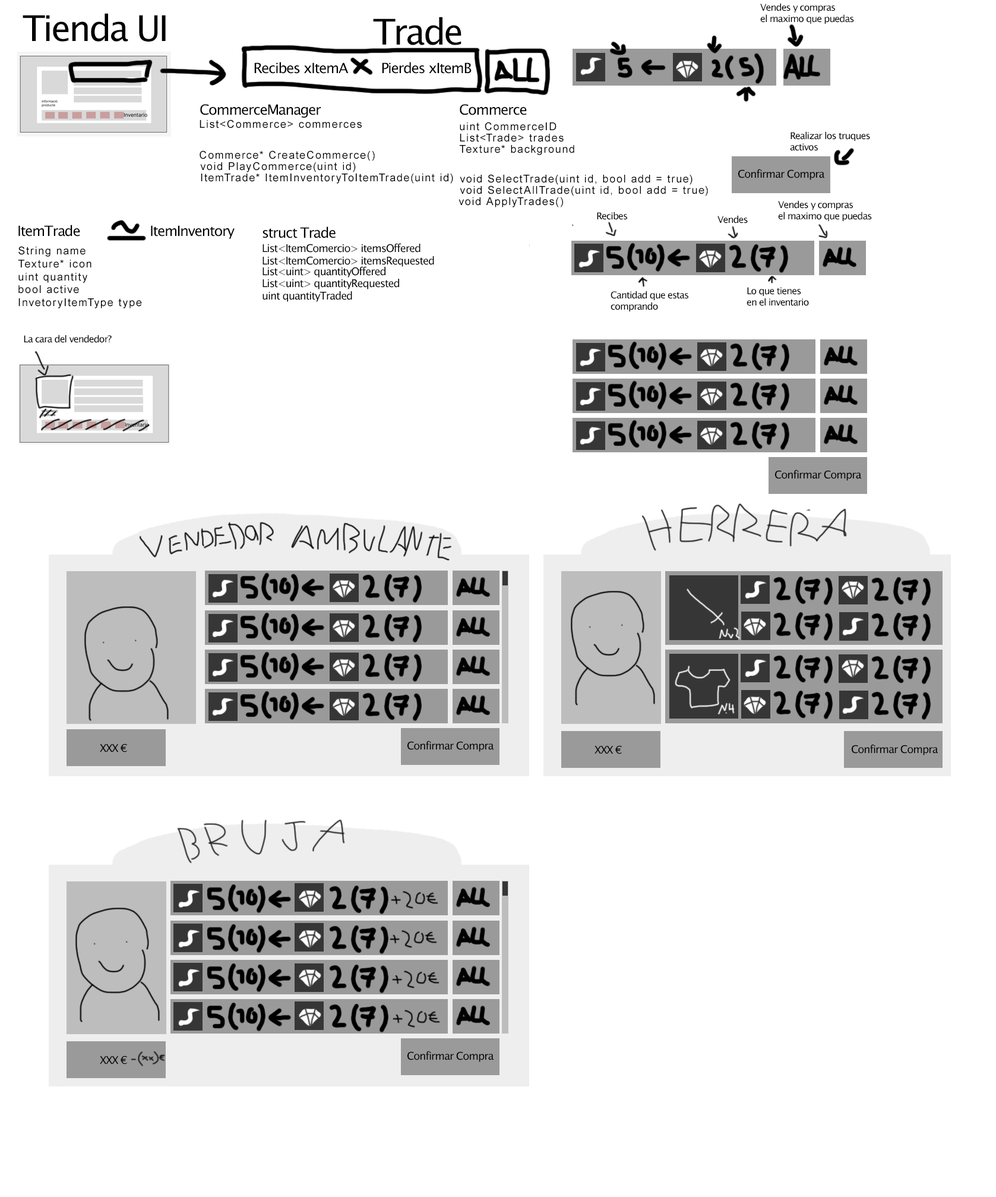
<style>
.page{position:relative;width:996px;height:1197px;background:#ffffff}
.page>*{position:absolute;margin:0}
.t1{font:9.5px "LucidaSansUnicode";letter-spacing:-0.06em;color:#000000}
.t2{font:35.7px "LucidaSansUnicode";letter-spacing:-0.06em;color:#000000}
.t3{font:14.3px "LucidaSansUnicode";letter-spacing:-0.06em;color:#000000}
.t4{font:10.7px "ArialMT";letter-spacing:0.1em;color:#000000}
.t5{font:10.7px "LucidaSansUnicode";letter-spacing:-0.06em;color:#000000}
</style>
<div class="page">
<p class="t1" style="left:761px;top:3px;width:93px;height:21px">Vendes y compras<br>el maximo que puedas</p>
<p class="t2" style="left:23px;top:13px;width:143px;height:29px">Tienda UI</p>
<p class="t2" style="left:373px;top:17px;width:89px;height:28px">Trade</p>
<p class="t3" style="left:254px;top:62px;width:95px;height:12px">Recibes xItemA</p>
<p class="t3" style="left:382px;top:62px;width:90px;height:12px">Pierdes xItemB</p>
<p class="t3" style="left:200px;top:104px;width:121px;height:14px">CommerceManager</p>
<p class="t3" style="left:460px;top:104px;width:67px;height:11px">Commerce</p>
<p class="t4" style="left:200px;top:119px;width:162px;height:9px">List&lt;Commerce&gt; commerces</p>
<p class="t4" style="left:460px;top:122px;width:97px;height:9px">uint CommerceID</p>
<p class="t4" style="left:460px;top:134px;width:104px;height:8px">List&lt;Trade&gt; trades</p>
<p class="t1" style="left:790px;top:131px;width:80px;height:20px">Realizar los truques<br>activos</p>
<p class="t4" style="left:459px;top:145px;width:116px;height:10px">Texture* background</p>
<p class="t4" style="left:200px;top:150px;width:175px;height:11px">Commerce* CreateCommerce()</p>
<p class="t4" style="left:200px;top:162px;width:156px;height:10px">void PlayCommerce(uint id)</p>
<p class="t4" style="left:201px;top:174px;width:252px;height:10px">ItemTrade* ItemInventoryToItemTrade(uint id)</p>
<p class="t5" style="left:739px;top:169px;width:86px;height:11px">Confirmar Compra</p>
<p class="t4" style="left:460px;top:174px;width:233px;height:11px">void SelectTrade(uint id, bool add = true)</p>
<p class="t4" style="left:460px;top:185px;width:248px;height:11px">void SelectAllTrade(uint id, bool add = true)</p>
<p class="t4" style="left:459px;top:197px;width:104px;height:10px">void ApplyTrades()</p>
<p class="t1" style="left:778px;top:200px;width:94px;height:21px">Vendes y compras<br>el maximo que puedas</p>
<p class="t1" style="left:597px;top:212px;width:30px;height:8px">Recibes</p>
<p class="t1" style="left:718px;top:215px;width:30px;height:8px">Vendes</p>
<p class="t3" style="left:18px;top:225px;width:62px;height:11px">ItemTrade</p>
<p class="t3" style="left:151px;top:225px;width:84px;height:14px">ItemInventory</p>
<p class="t3" style="left:263px;top:226px;width:73px;height:12px">struct Trade</p>
<p class="t4" style="left:18px;top:246px;width:124px;height:62px">String name<br>Texture* icon<br>uint quantity<br>bool active<br>InvetoryItemType type</p>
<p class="t5" style="left:263px;top:243px;width:158px;height:10px">List&lt;ItemComercio&gt; itemsOffered</p>
<p class="t5" style="left:263px;top:256px;width:171px;height:11px">List&lt;ItemComercio&gt; itemsRequested</p>
<p class="t5" style="left:263px;top:266px;width:123px;height:11px">List&lt;uint&gt; quantityOffered</p>
<p class="t5" style="left:263px;top:279px;width:136px;height:10px">List&lt;uint&gt; quantityRequested</p>
<p class="t5" style="left:263px;top:291px;width:89px;height:11px">uint quantityTraded</p>
<p class="t1" style="left:611px;top:291px;width:78px;height:20px">Cantidad que estas<br>comprando</p>
<p class="t1" style="left:747px;top:287px;width:62px;height:19px">Lo que tienes<br>en el inventario</p>
<p class="t1" style="left:24px;top:335px;width:88px;height:8px">La cara del vendedor?</p>
<p class="t5" style="left:775px;top:469px;width:87px;height:12px">Confirmar Compra</p>
<p class="t5" style="left:100px;top:743px;width:27px;height:9px">XXX €</p>
<p class="t5" style="left:408px;top:740px;width:86px;height:12px">Confirmar Compra</p>
<p class="t5" style="left:595px;top:745px;width:27px;height:9px">XXX €</p>
<p class="t5" style="left:852px;top:744px;width:86px;height:11px">Confirmar Compra</p>
<p class="t5" style="left:100px;top:1055px;width:27px;height:9px">XXX €</p>
<p class="t5" style="left:408px;top:1051px;width:86px;height:11px">Confirmar Compra</p>
</div>
